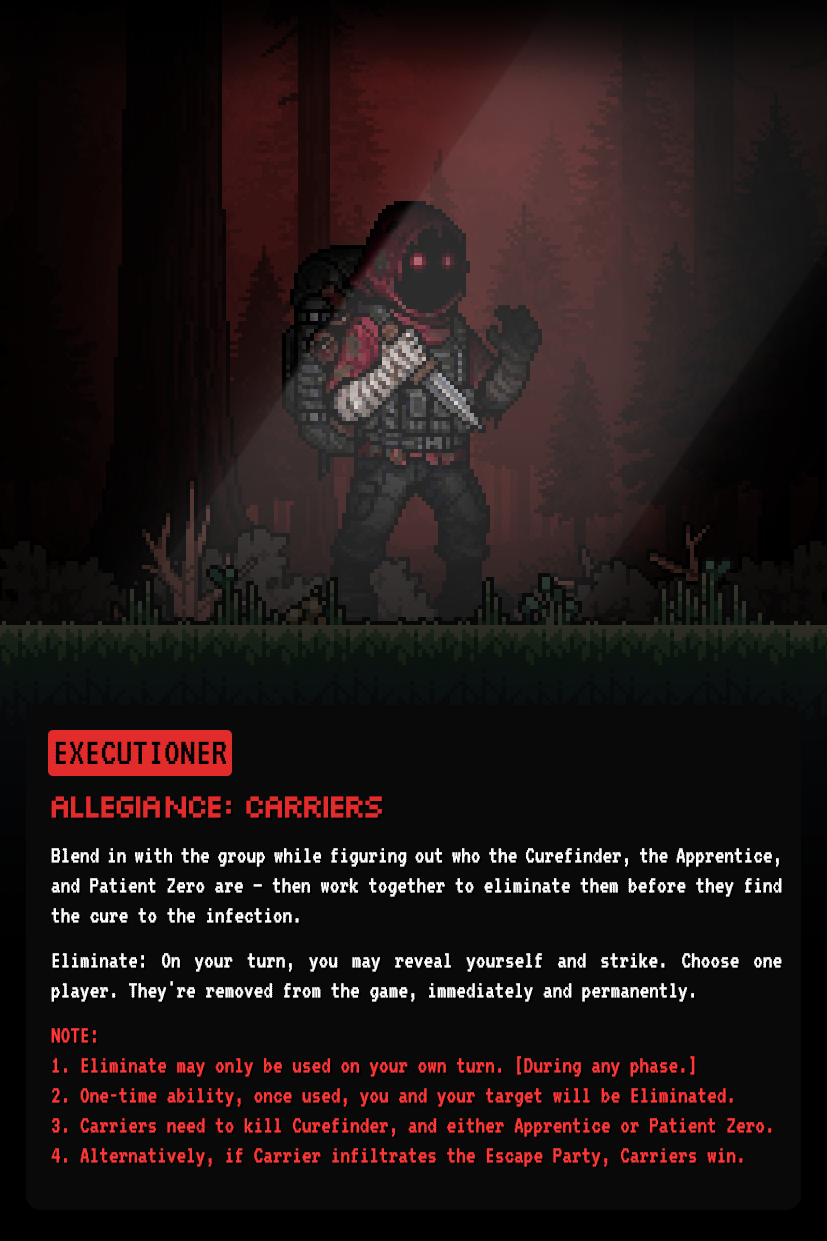
<style>
.page{position:relative;width:827px;height:1241px;background:#090909}
.page>*{position:absolute;margin:0}
.t1{font:39.7px "VT323-Regular";color:#000000}
.t2{font:25px "VT323-Regular";color:#ffffff;scale:0.96 1}
.t3{font:33.3px "Silkscreen-Regular";letter-spacing:-0.05em;color:#e22b2b;scale:0.96 1}
.t4{font:25px "VT323-Regular";color:#ff3737;scale:0.96 1}
</style>
<div class="page">
<p class="t1" style="left:55px;top:741px;width:172px;height:23px">EXECUTIONER</p>
<p class="t2" style="left:51px;top:796px;width:731px;height:371px;text-align:justify"><span class="t3">allegiancE: CARRIERS<br><br></span>Blend in with the group while figuring out who the Curefinder, the Apprentice, and Patient Zero are — then work together to eliminate them before they find the cure to the infection.<br><br>Eliminate: On your turn, you may reveal yourself and strike. Choose one player. They're removed from the game, immediately and permanently.<br><br><span class="t4">NOTE:<br>1. Eliminate may only be used on your own turn. [During any phase.]<br>2. One-time ability, once used, you and your target will be Eliminated.<br>3. Carriers need to kill Curefinder, and either Apprentice or Patient Zero.<br>4. Alternatively, if Carrier infiltrates the Escape Party, Carriers win.</span></p>
</div>
